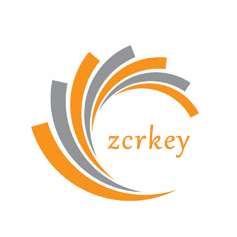
<style>
.page{position:relative;width:237px;height:237px;background:#ffffff}
.page>*{position:absolute;margin:0}
.t1{font:36px "Gabriola";letter-spacing:0.035em;color:#f8931d;font-weight:bold}
</style>
<div class="page">
<p class="t1" style="left:107px;top:124px;width:83px;height:34px">zcrkey</p>
</div>
